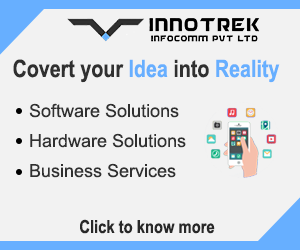
<style>
.page{position:relative;width:300px;height:250px;background:#f2f2f2}
.page>*{position:absolute;margin:0}
.t1{font:24px "ArialNarrow-Bold";color:#303030}
.t2{font:24px "ArialNarrow-Bold";color:#67afff}
.t3{font:18px/30px "ArialMT";color:#303030}
.t4{font:18px "ArialNarrow-Bold";color:#282828}
</style>
<div class="page">
<p class="t1" style="left:13px;top:59px;width:267px;height:24px">Covert your <span class="t2">Idea</span> into <span class="t2">Reality</span></p>
<p class="t3" style="left:29px;top:103px;width:157px;height:75px">Software Solutions<br>Hardware Solutions<br>Business Services</p>
<p class="t4" style="left:80px;top:219px;width:135px;height:15px">Click to know more</p>
</div>
